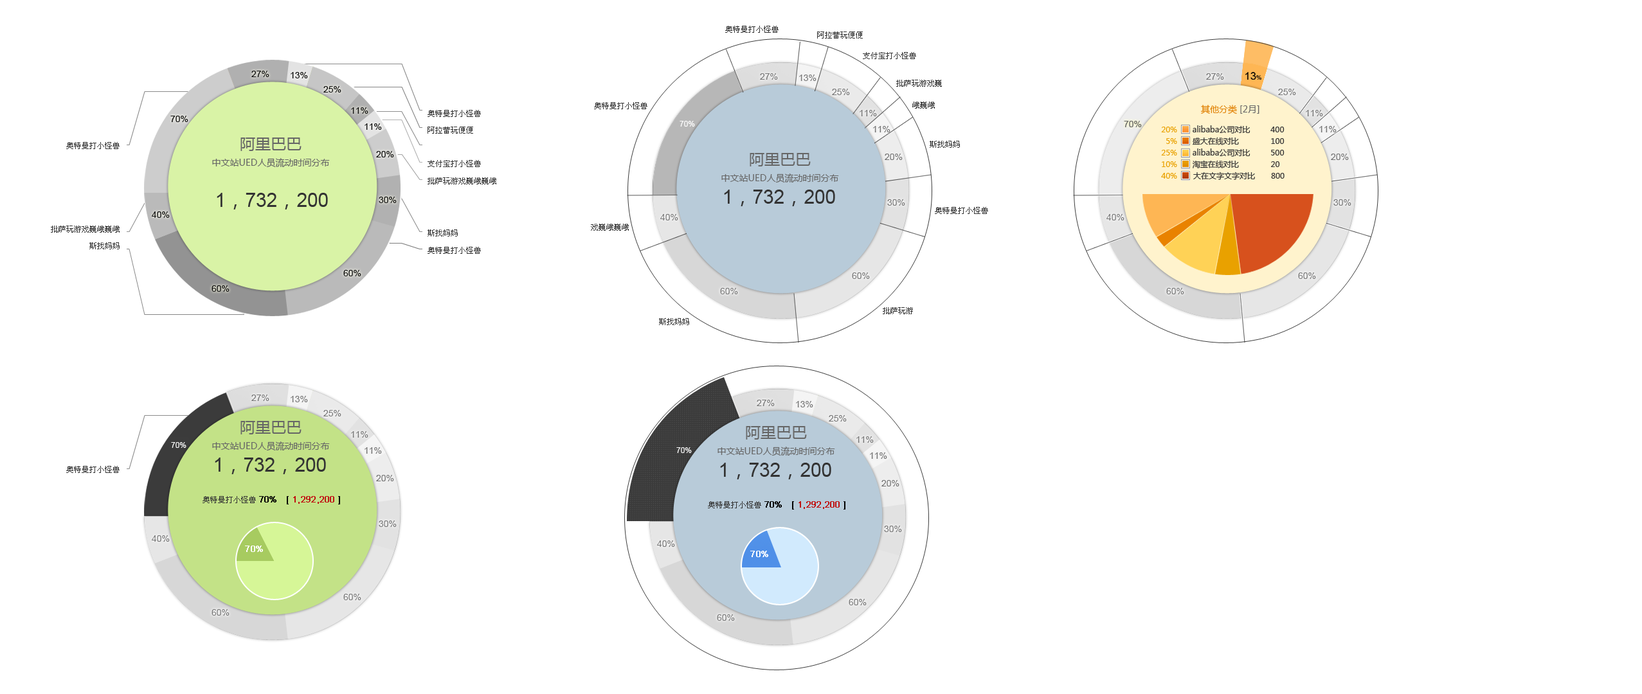
<style>
.page{position:relative;width:1642px;height:694px;background:#ffffff}
.page>*{position:absolute;margin:0}
.t1{font:7.7px/17.4px "SimSun";color:#333333}
.t2{font:7.7px/16.7px "SimSun";color:#333333}
.t3{font:7.7px/16.7px "SimSun";color:#ffffff}
.t4{font:9px "MicrosoftYaHei";color:#e18307}
.t5{font:7.7px "MicrosoftYaHei";color:#e18307}
.t6{font:9px "MicrosoftYaHei";color:#666666}
.t7{font:7.7px/11.6px "MicrosoftYaHei";color:#333333}
.t8{font:9px/16.7px "MicrosoftYaHei";color:#666666}
.t9{font:15.4px/16.7px "MicrosoftYaHei";color:#666666}
.t10{font:7.7px/11.6px "MicrosoftYaHei";color:#e9a100}
.t11{font:19.3px "ArialMT";color:#333333}
.t12{font:19.3px "MicrosoftYaHei";color:#333333}
.t13{font:7.7px "SimSun";color:#333333}
.t14{font:9px "ArialMT";color:#c01313;font-weight:bold}
.t15{font:9px "ArialMT";color:#000000;font-weight:bold}
.t16{font:9px "ArialMT";color:#ffffff;font-weight:bold}
</style>
<div class="page">
<p class="t1" style="left:428px;top:110px;width:68px;height:144px"><span class="t2">奥特曼打小怪兽<br>阿拉蕾玩便便<br></span><span class="t3">路易斯找妈妈<br></span><span class="t2">支付宝打小怪兽<br></span>批萨玩游戏巍峨巍峨<br><br><br>斯找妈妈<br>奥特曼打小怪兽</p>
<p class="t4" style="left:1201px;top:105px;width:58px;height:9px"><span class="t5">    </span>     其他分类 <span class="t6">[2月]</span></p>
<p class="t7" style="left:1181px;top:125px;width:103px;height:55px">alibaba公司对比         400<br>     盛大在线对比              100<br>     alibaba公司对比         500<br>     淘宝在线对比              20<br>盛  大在文字文字对比       800</p>
<p class="t8" style="left:212px;top:138px;width:118px;height:30px;text-align:center"><span class="t9">阿里巴巴<br></span>中文站UED人员流动时间分布</p>
<p class="t10" style="left:1161px;top:127px;width:16px;height:52px;text-align:right">20%<br>5%<br>25%<br>10%<br>40%</p>
<p class="t2" style="left:51px;top:142px;width:69px;height:107px;text-align:right">奥特曼打小怪兽<br> <br><br><br><br>批萨玩游戏巍峨巍峨<br>斯找妈妈</p>
<p class="t8" style="left:721px;top:153px;width:118px;height:30px;text-align:center"><span class="t9">阿里巴巴<br></span>中文站UED人员流动时间分布</p>
<p class="t11" style="left:217px;top:193px;width:111px;height:17px">1<span class="t12">，</span>732<span class="t12">，</span>200</p>
<p class="t11" style="left:724px;top:190px;width:111px;height:16px">1<span class="t12">，</span>732<span class="t12">，</span>200</p>
<p class="t8" style="left:212px;top:421px;width:118px;height:30px;text-align:center"><span class="t9">阿里巴巴<br></span>中文站UED人员流动时间分布</p>
<p class="t8" style="left:717px;top:426px;width:118px;height:30px;text-align:center"><span class="t9">阿里巴巴<br></span>中文站UED人员流动时间分布</p>
<p class="t11" style="left:215px;top:458px;width:111px;height:16px">1<span class="t12">，</span>732<span class="t12">，</span>200</p>
<p class="t13" style="left:66px;top:466px;width:54px;height:7px">奥特曼打小怪兽</p>
<p class="t11" style="left:720px;top:463px;width:111px;height:17px">1<span class="t12">，</span>732<span class="t12">，</span>200</p>
<p class="t13" style="left:203px;top:496px;width:53px;height:7px">奥特曼打小怪兽</p>
<p class="t14" style="left:259px;top:496px;width:81px;height:9px"><span class="t15">70%   [ </span>1,292,200<span class="t15"> ]</span></p>
<p class="t13" style="left:708px;top:501px;width:53px;height:8px">奥特曼打小怪兽</p>
<p class="t14" style="left:764px;top:501px;width:81px;height:9px"><span class="t15">70%   [ </span>1,292,200<span class="t15"> ]</span></p>
<p class="t16" style="left:245px;top:546px;width:18px;height:6px">70%</p>
<p class="t16" style="left:750px;top:551px;width:18px;height:6px">70%</p>
</div>
